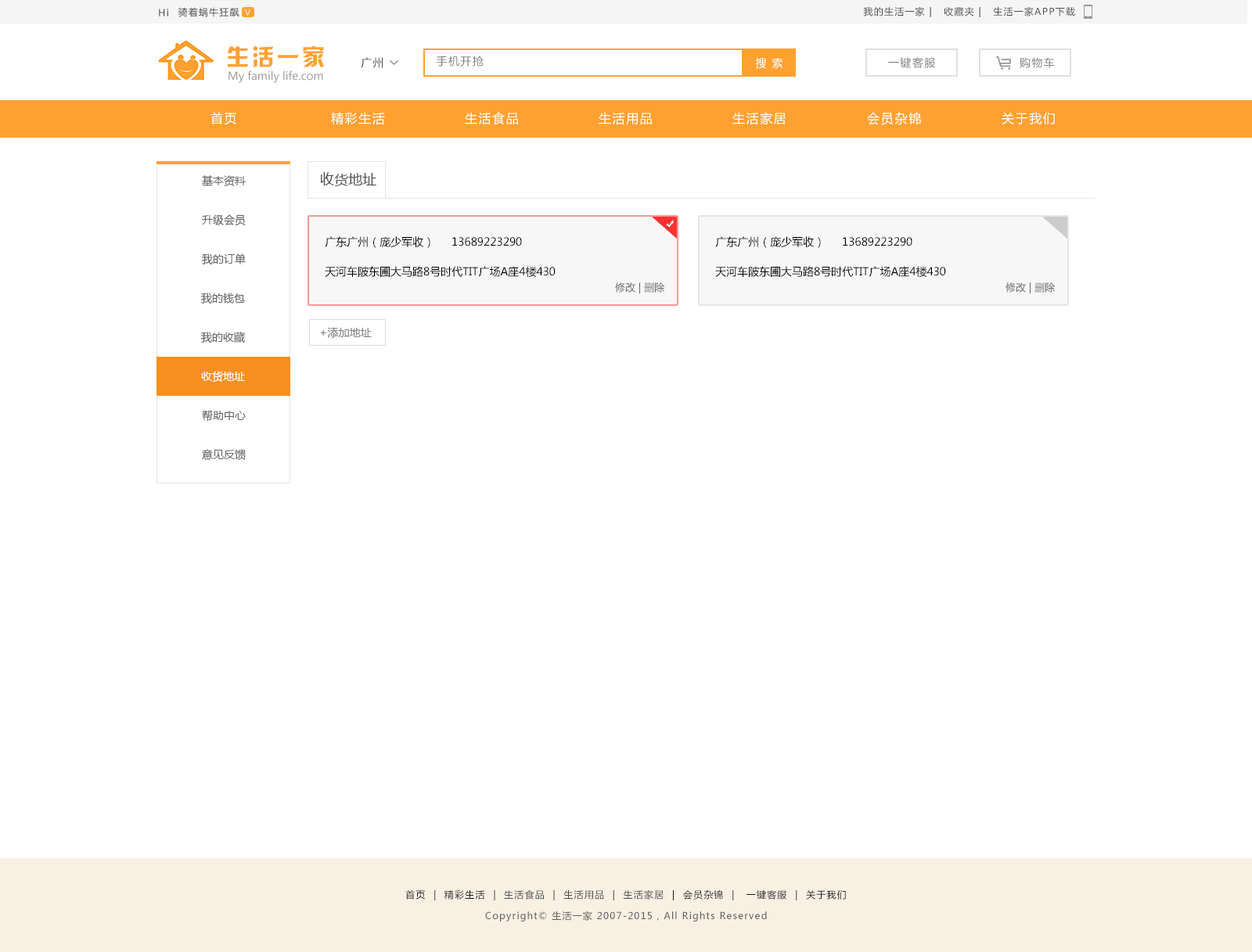
<style>
.page{position:relative;width:1252px;height:952px;background:#ffffff}
.page>*{position:absolute;margin:0}
.t1{font:9.4px "MicrosoftYaHei";letter-spacing:0.1em;color:#4d4d4d}
.t2{font:7.8px "MicrosoftYaHei";letter-spacing:0.1em;color:#ffffff}
.t3{font:22.7px "HYk2gj";letter-spacing:0.1em;color:#ffa130}
.t4{font:11px "MicrosoftYaHei";letter-spacing:0.1em;color:#4d4d4d}
.t5{font:11px "MicrosoftYaHei";letter-spacing:0.1em;color:#808080}
.t6{font:11px "MicrosoftYaHei";letter-spacing:0.1em;color:#ffffff}
.t7{font:11px "MicrosoftYaHei";color:#999999}
.t8{font:12.5px "MicrosoftYaHei";letter-spacing:0.1em;color:#ffffff}
.t9{font:12.9px "MicrosoftYaHei";letter-spacing:0.1em;color:#ffffff}
.t10{font:14.1px "MicrosoftYaHei";color:#4d4d4d}
.t11{font:11px "MicrosoftYaHei";color:#666666}
.t12{font:11px "MicrosoftYaHei";color:#656565}
.t13{font:11px "MicrosoftYaHei";color:#000000}
.t14{font:10.2px "MicrosoftYaHei";color:#666666}
.t15{font:11px "MicrosoftYaHei";color:#808080}
.t16{font:11px "MicrosoftYaHei";color:#ffffff}
.t17{font:9.4px "MicrosoftYaHei";letter-spacing:0.1em;color:#1a1a1a}
.t18{font:9.4px "MicrosoftYaHei";letter-spacing:0.1em;color:#5e5e5e}
</style>
<div class="page">
<p class="t1" style="left:159px;top:9px;width:9px;height:7px">Hi</p>
<p class="t1" style="left:178px;top:7px;width:61px;height:10px">骑着蜗牛狂飙</p>
<p class="t2" style="left:245px;top:9px;width:5px;height:7px">V</p>
<p class="t1" style="left:863px;top:7px;width:212px;height:10px">我的生活一家 |   收藏夹 |   生活一家APP下载</p>
<p class="t3" style="left:227px;top:46px;width:97px;height:22px">生活一家</p>
<p class="t4" style="left:361px;top:57px;width:22px;height:11px">广州</p>
<p class="t5" style="left:436px;top:56px;width:48px;height:11px">手机开抢</p>
<p class="t6" style="left:755px;top:57px;width:28px;height:12px">搜 索</p>
<p class="t5" style="left:888px;top:57px;width:48px;height:11px">一键客服</p>
<p class="t5" style="left:1020px;top:57px;width:35px;height:11px">购物车</p>
<p class="t7" style="left:229px;top:70px;width:94px;height:13px">My family life.com</p>
<p class="t8" style="left:211px;top:112px;width:25px;height:13px">首页</p>
<p class="t8" style="left:331px;top:112px;width:54px;height:13px">精彩生活</p>
<p class="t8" style="left:465px;top:112px;width:53px;height:13px">生活食品</p>
<p class="t8" style="left:599px;top:112px;width:53px;height:13px">生活用品</p>
<p class="t8" style="left:732px;top:112px;width:54px;height:13px">生活家居</p>
<p class="t9" style="left:867px;top:112px;width:54px;height:13px">会员杂锦</p>
<p class="t8" style="left:1002px;top:112px;width:53px;height:13px">关于我们</p>
<p class="t10" style="left:320px;top:172px;width:56px;height:14px">收货地址</p>
<p class="t11" style="left:202px;top:175px;width:44px;height:11px">基本资料</p>
<p class="t12" style="left:202px;top:214px;width:44px;height:12px">升级会员</p>
<p class="t13" style="left:325px;top:236px;width:105px;height:12px">广东广州（庞少军收）</p>
<p class="t13" style="left:452px;top:237px;width:70px;height:10px">13689223290</p>
<p class="t13" style="left:715px;top:236px;width:106px;height:12px">广东广州（庞少军收）</p>
<p class="t13" style="left:843px;top:237px;width:69px;height:10px">13689223290</p>
<p class="t12" style="left:201px;top:254px;width:45px;height:11px">我的订单</p>
<p class="t13" style="left:325px;top:266px;width:231px;height:11px">天河车陂东圃大马路8号时代TIT广场A座4楼430</p>
<p class="t13" style="left:715px;top:266px;width:231px;height:11px">天河车陂东圃大马路8号时代TIT广场A座4楼430</p>
<p class="t12" style="left:200px;top:293px;width:45px;height:11px">我的钱包</p>
<p class="t14" style="left:615px;top:283px;width:50px;height:11px">修改 | 删除</p>
<p class="t14" style="left:1006px;top:283px;width:50px;height:11px">修改 | 删除</p>
<p class="t15" style="left:320px;top:327px;width:52px;height:11px">+添加地址</p>
<p class="t12" style="left:200px;top:332px;width:45px;height:12px">我的收藏</p>
<p class="t16" style="left:201px;top:371px;width:44px;height:12px">收货地址</p>
<p class="t12" style="left:202px;top:410px;width:44px;height:12px">帮助中心</p>
<p class="t12" style="left:202px;top:449px;width:44px;height:11px">意见反馈</p>
<p class="t17" style="left:405px;top:890px;width:441px;height:11px">首页  |  精彩生活  |  <span class="t1">生活食品</span>  |  <span class="t1">生活用品</span>  |  <span class="t1">生活家居</span>  |  会员杂锦  |   一键客服  |  关于我们</p>
<p class="t18" style="left:485px;top:911px;width:282px;height:11px">Copyright© 生活一家 2007-2015，All Rights Reserved</p>
</div>
